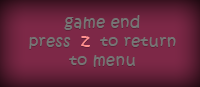
<style>
.page{position:relative;width:200px;height:87px;background:#7d2847}
.page>*{position:absolute;margin:0}
.t1{font:16px "KristenITC-Regular";letter-spacing:0.025em;color:#767575}
.t2{font:16px "KristenITC-Regular";letter-spacing:0.025em;color:#ff8f8f}
</style>
<div class="page">
<p class="t1" style="left:29px;top:15px;width:147px;height:52px;text-align:center">game end<br>press  <span class="t2">z</span>  to return<br>to menu</p>
</div>
